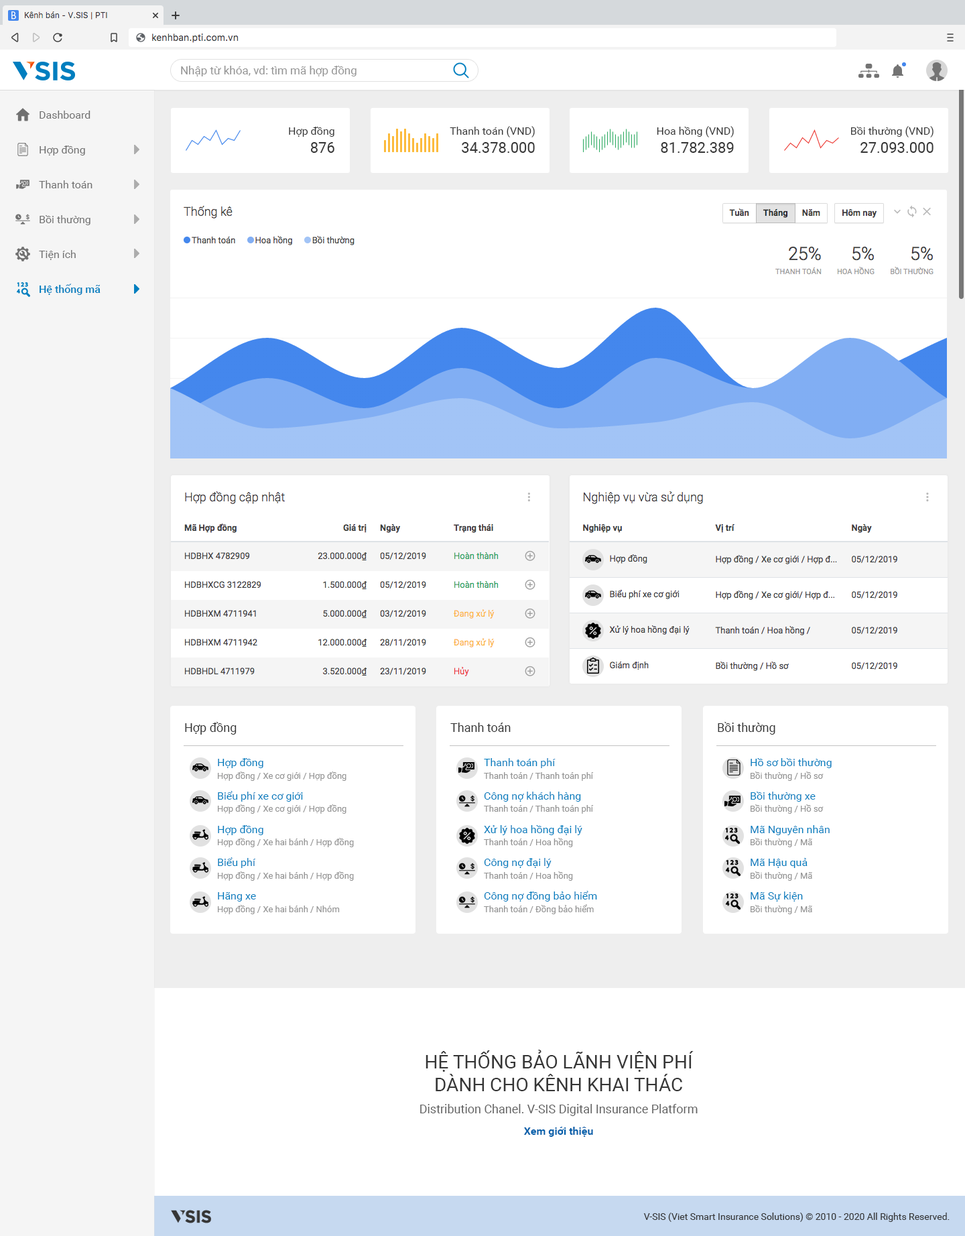
<style>
.page{position:relative;width:965px;height:1236px;background:#ffffff}
.page>*{position:absolute;margin:0}
.t1{font:11.4px "Roboto-Regular";color:#959595}
.t2{font:10.7px/26.8px "Roboto-Regular";color:#707070}
.t3{font:10.7px/26.8px "Roboto-Medium";color:#007ebf}
.t4{font:10.7px/12.1px "Roboto-Regular";color:#363636}
.t5{font:14.7px/12.1px "Roboto-Regular";color:#363636}
.t6{font:12.1px "Roboto-Regular";color:#363636}
.t7{font:8.7px "Roboto-Regular";color:#959595}
.t8{font:10.7px "Roboto-Regular";color:#007ebf}
.t9{font:12.1px "Roboto-Regular";color:#636363}
.t10{font:18.8px "Roboto-Regular";color:#363636}
.t11{font:10.7px "Roboto-Bold";color:#005faa}
.t12{font:9.4px "Roboto-Regular";color:#363636}
</style>
<div class="page">
<p class="t1" style="left:181px;top:66px;width:176px;height:10px">Nhập từ khóa, vd: tìm mã hợp đồng</p>
<p class="t2" style="left:39px;top:111px;width:62px;height:184px">Dashboard<br>Hợp đồng<br>Thanh toán<br>Bồi thường<br>Tiện ích<br><span class="t3">Hệ thống mã</span></p>
<p class="t4" style="left:450px;top:126px;width:85px;height:27px;text-align:right">Thanh toán (VND)<br><span class="t5">34.378.000</span></p>
<p class="t4" style="left:657px;top:126px;width:77px;height:27px;text-align:right">Hoa hồng (VND)<br><span class="t5">81.782.389</span></p>
<p class="t4" style="left:851px;top:126px;width:82px;height:27px;text-align:right">Bồi thường (VND)<br><span class="t5">27.093.000</span></p>
<p class="t4" style="left:289px;top:127px;width:45px;height:26px;text-align:right">Hợp đồng<br><span class="t5">876</span></p>
<p class="t6" style="left:185px;top:722px;width:52px;height:12px">Hợp đồng</p>
<p class="t6" style="left:450px;top:722px;width:61px;height:10px">Thanh toán</p>
<p class="t6" style="left:718px;top:722px;width:57px;height:12px">Bồi thường</p>
<p class="t7" style="left:218px;top:758px;width:136px;height:156px"><span class="t8">Hợp đồng<br></span>Hợp đồng / Xe cơ giới / Hợp đồng<br><span class="t8">Biểu phí xe cơ giới<br></span>Hợp đồng / Xe cơ giới / Hợp đồng<br><span class="t8">Hợp đồng<br></span>Hợp đồng / Xe hai bánh / Hợp đồng<br><span class="t8">Biểu phí<br></span>Hợp đồng / Xe hai bánh / Hợp đồng<br><span class="t8">Hãng xe<br></span>Hợp đồng / Xe hai bánh / Nhóm</p>
<p class="t7" style="left:484px;top:758px;width:113px;height:156px"><span class="t8">Thanh toán phí<br></span>Thanh toán / Thanh toán phí<br><span class="t8">Công nợ khách hàng<br></span>Thanh toán / Thanh toán phí<br><span class="t8">Xử lý hoa hồng đại lý<br></span>Thanh toán / Hoa hồng<br><span class="t8">Công nợ đại lý<br></span>Thanh toán / Hoa hồng<br><span class="t8">Công nợ đồng bảo hiểm<br></span>Thanh toán / Đồng bảo hiểm</p>
<p class="t7" style="left:751px;top:758px;width:81px;height:156px"><span class="t8">Hồ sơ bồi thường<br></span>Bồi thường / Hồ sơ<br><span class="t8">Bồi thường xe<br></span>Bồi thường / Hồ sơ<br><span class="t8">Mã Nguyên nhân<br></span>Bồi thường / Mã<br><span class="t8">Mã Hậu quả<br></span>Bồi thường / Mã<br><span class="t8">Mã Sự kiện<br></span>Bồi thường / Mã</p>
<p class="t9" style="left:420px;top:1049px;width:278px;height:88px;text-align:center"><span class="t10">HỆ THỐNG BẢO LÃNH VIỆN PHÍ<br>DÀNH CHO KÊNH KHAI THÁC<br></span>Distribution Chanel. V-SIS Digital Insurance Platform<br><span class="t11">Xem giới thiệu</span></p>
<p class="t12" style="left:643px;top:1212px;width:307px;height:10px">V-SIS (Viet Smart Insurance Solutions) © 2010 - 2020 All Rights Reserved.</p>
</div>
